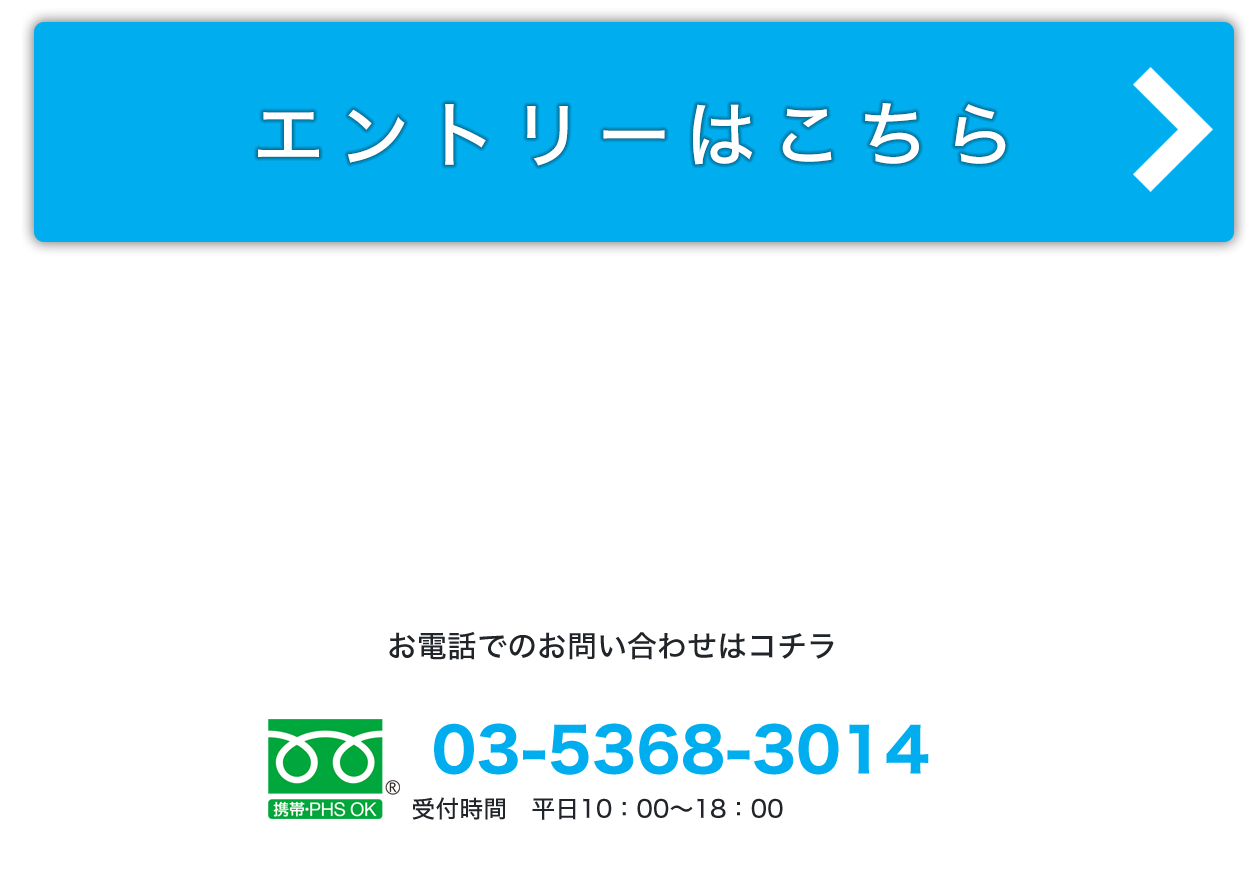
<style>
.page{position:relative;width:1246px;height:872px;background:#ffffff}
.page>*{position:absolute;margin:0}
.t1{font:72px "HiraginoSans-W5";letter-spacing:0.2em;color:#ffffff}
.t2{font:30px "HiraginoSans-W5";color:#212529}
.t3{font:60px "HiraginoSans-W7";color:#00aeef}
.t4{font:24px "HiraginoSans-W5";color:#212529}
</style>
<div class="page">
<p class="t1" style="left:258px;top:103px;width:748px;height:63px">エントリーはこちら</p>
<p class="t2" style="left:389px;top:631px;width:445px;height:29px">お電話でのお問い合わせはコチラ</p>
<p class="t3" style="left:434px;top:723px;width:495px;height:52px">03-5368-3014</p>
<p class="t4" style="left:412px;top:797px;width:371px;height:23px">受付時間　平日10：00〜18：00</p>
</div>
